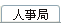
<style>
.page{position:relative;width:61px;height:24px;background:#ffffff}
.page>*{position:absolute;margin:0}
.t1{font:12px "SimSun";color:#151010}
</style>
<div class="page">
<p class="t1" style="left:13px;top:9px;width:35px;height:11px">人事局</p>
</div>
